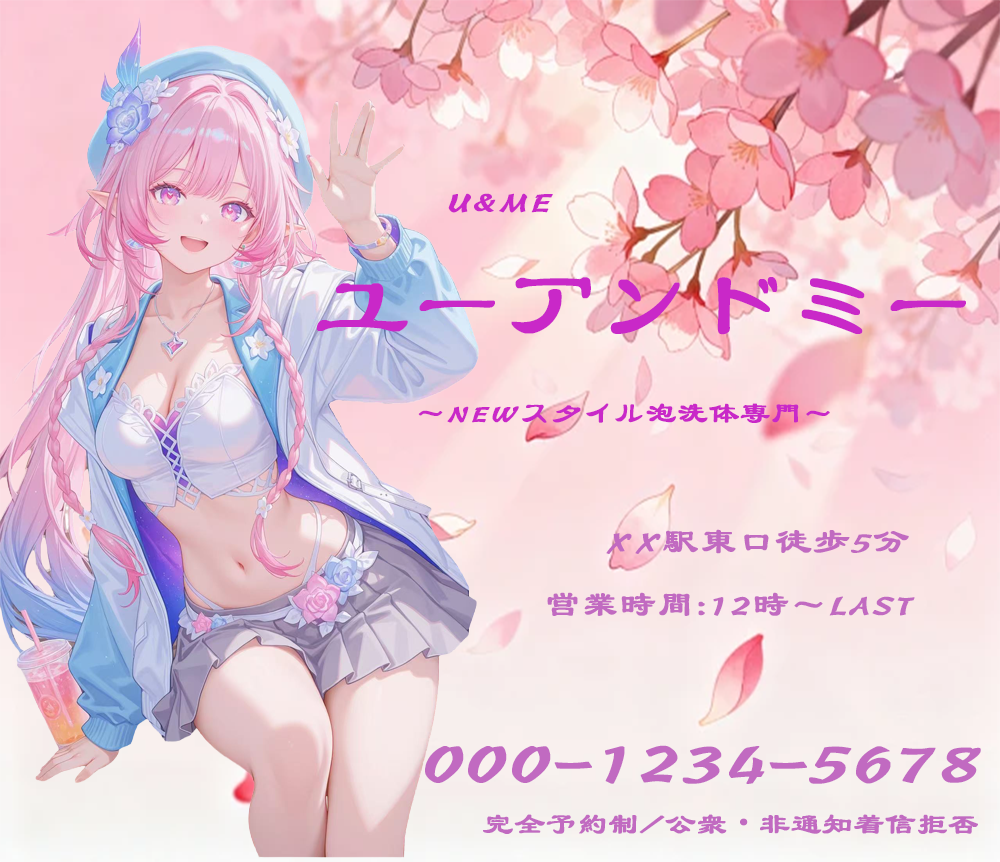
<style>
.page{position:relative;width:1000px;height:862px}
.page>*{position:absolute;margin:0}
.t1{font:36px "STBaoliSC-Regular";letter-spacing:0.02em;color:#c928c8;text-transform:uppercase;font-weight:bold}
.t2{font:90px "STBaoliSC-Regular";letter-spacing:0.02em;color:#c928c8;text-transform:uppercase;font-weight:bold}
.t3{font:30px "STBaoliSC-Regular";letter-spacing:0.02em;color:#c928c8;text-transform:uppercase;font-weight:bold}
.t4{font:36px "STBaoliSC-Regular";letter-spacing:0.02em;color:#c16ac1;text-transform:uppercase;font-weight:bold}
.t5{font:72px "STBaoliSC-Regular";letter-spacing:0.02em;color:#c16ac1;text-transform:uppercase;font-weight:bold}
.t6{font:30px "STBaoliSC-Regular";letter-spacing:0.02em;color:#c16ac1;text-transform:uppercase;font-weight:bold}
.t7{font:30px "KozGoPr6N-Regular";letter-spacing:0.02em;color:#c16ac1;text-transform:uppercase;font-weight:bold}
</style>
<div class="page">
<p class="t1" style="left:448px;top:193px;width:105px;height:20px">U&amp;Me</p>
<p class="t2" style="left:316px;top:277px;width:650px;height:58px">ユーアンドミー</p>
<p class="t3" style="left:418px;top:403px;width:412px;height:20px">～Newスタイル泡洗体専門～</p>
<p class="t4" style="left:606px;top:529px;width:303px;height:25px">XX駅東口徒歩5分</p>
<p class="t4" style="left:547px;top:592px;width:368px;height:24px">営業時間:12時～LAST</p>
<p class="t5" style="left:425px;top:745px;width:556px;height:39px">000-1234-5678</p>
<p class="t6" style="left:483px;top:814px;width:495px;height:20px">完全予約制/公衆<span class="t7">・</span>非通知着信拒否</p>
</div>
